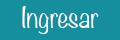
<style>
.page{position:relative;width:120px;height:40px;background:#158e9e}
.page>*{position:absolute;margin:0}
.t1{font:25px "Noteworthy-Light";color:#ffffff}
</style>
<div class="page">
<p class="t1" style="left:22px;top:6px;width:77px;height:28px">Ingresar</p>
</div>
